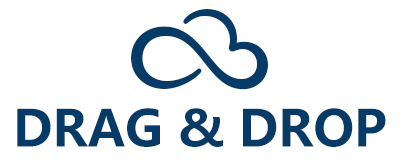
<style>
.page{position:relative;width:400px;height:160px;background:#ffffff}
.page>*{position:absolute;margin:0}
.t1{font:50px "MicrosoftYaHei-Bold";color:#053b66}
</style>
<div class="page">
<p class="t1" style="left:17px;top:108px;width:369px;height:39px">DRAG &amp; DROP</p>
</div>
